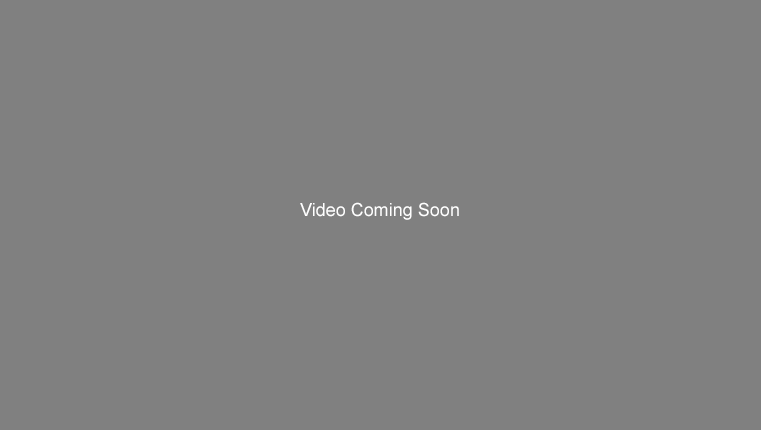
<style>
.page{position:relative;width:761px;height:430px;background:#808080}
.page>*{position:absolute;margin:0}
.t1{font:18px "ArialMT";color:#ffffff}
</style>
<div class="page">
<p class="t1" style="left:300px;top:202px;width:159px;height:18px">Video Coming Soon</p>
</div>
